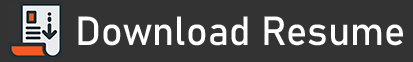
<style>
.page{position:relative;width:413px;height:62px;background:#333333}
.page>*{position:absolute;margin:0}
.t1{font:40px "Bahnschrift";color:#ffffff}
</style>
<div class="page">
<p class="t1" style="left:78px;top:16px;width:325px;height:30px">Download Resume</p>
</div>
